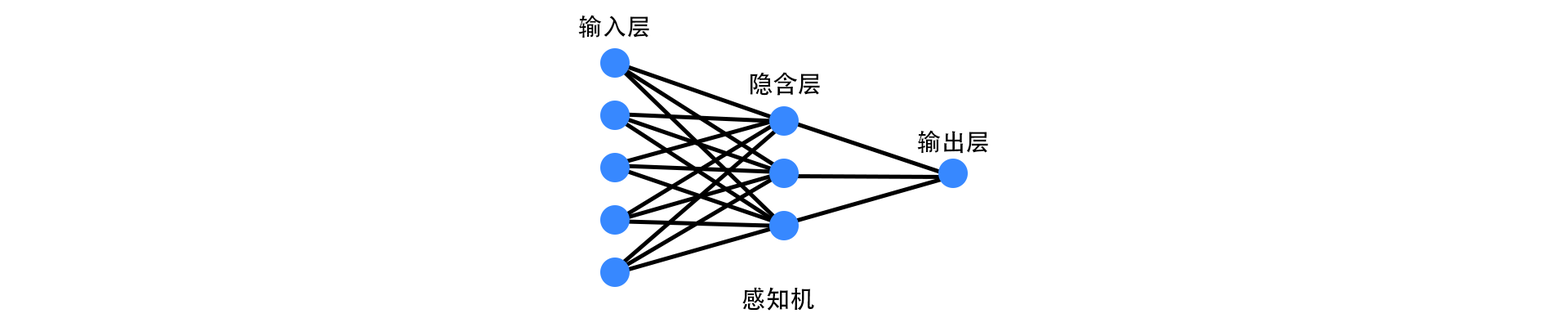
<style>
.page{position:relative;width:1568px;height:327px;background:#ffffff}
.page>*{position:absolute;margin:0}
.t1{font:24.5px "AdobeHeitiStd-Regular";color:#000000}
</style>
<div class="page">
<p class="t1" style="left:578px;top:15px;width:71px;height:23px">输入层</p>
<p class="t1" style="left:750px;top:72px;width:70px;height:24px">隐含层</p>
<p class="t1" style="left:917px;top:130px;width:71px;height:24px">输出层</p>
<p class="t1" style="left:742px;top:287px;width:72px;height:23px">感知机</p>
</div>
